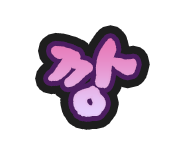
<style>
.page{position:relative;width:187px;height:143px;background:#ffffff}
.page>*{position:absolute;margin:0}
.t1{font:95px "SangSangRockOTF";letter-spacing:-0.08em}
</style>
<div class="page">
<p class="t1" style="left:50px;top:40px;width:85px;height:75px;rotate:8deg">깡</p>
</div>
